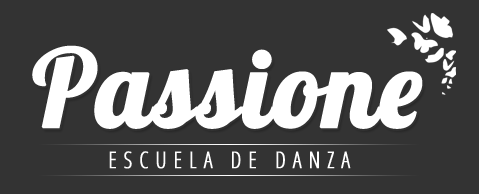
<style>
.page{position:relative;width:479px;height:194px;background:#333333}
.page>*{position:absolute;margin:0}
.t1{font:106.8px "Lobster-Regular";color:#ffffff;font-weight:bold}
.t2{font:22.9px "OpenSans-CondensedLight";letter-spacing:0.3em;color:#ffffff;text-transform:uppercase;font-weight:bold;scale:0.95 1}
</style>
<div class="page">
<p class="t1" style="left:32px;top:45px;width:391px;height:84px">Passione</p>
<p class="t2" style="left:109px;top:151px;width:242px;height:18px">escuela de danza</p>
</div>
